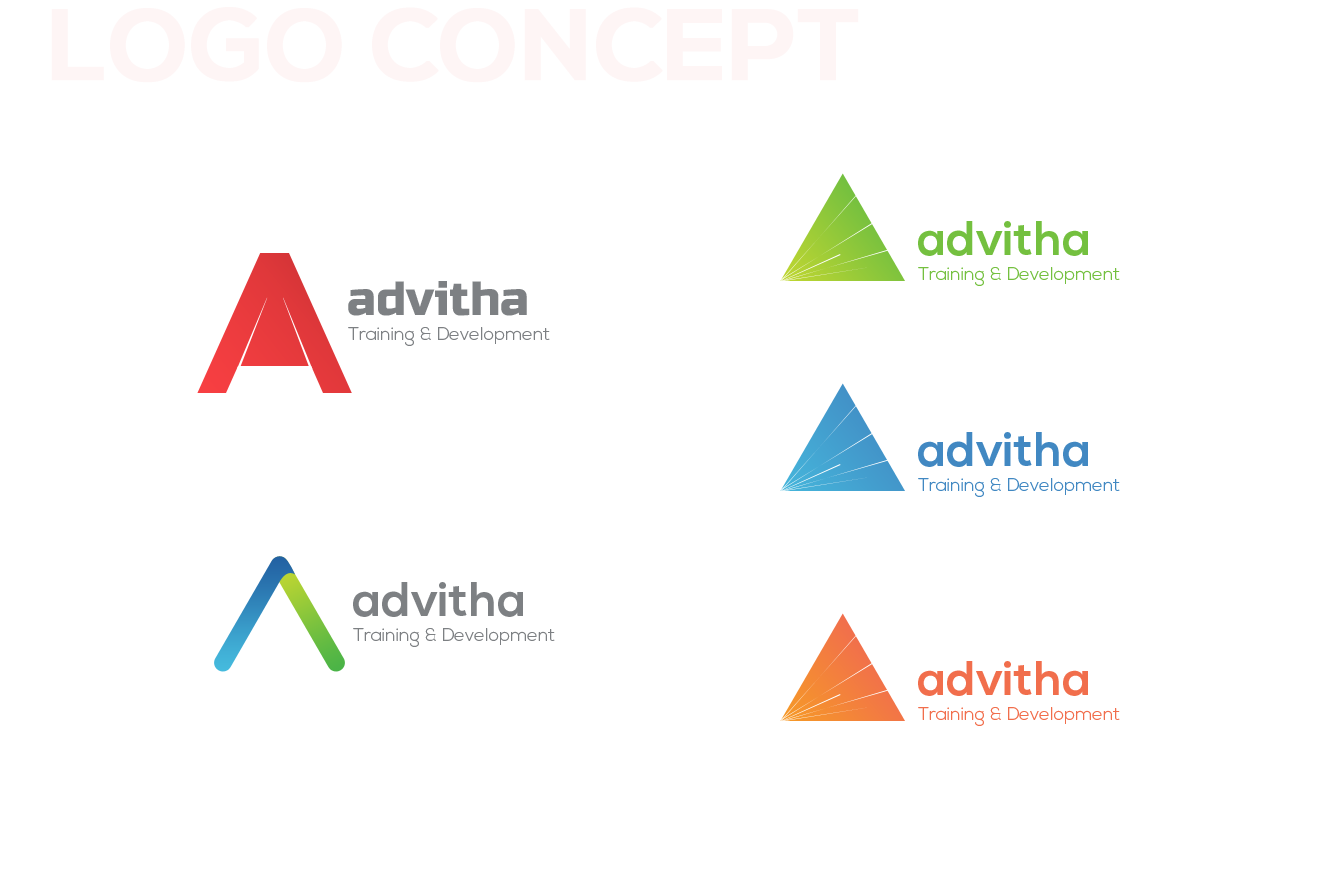
<style>
.page{position:relative;width:1325px;height:887px;background:#ffffff}
.page>*{position:absolute;margin:0}
.t1{font:100px "NexaBold";color:#fef5f5;font-weight:bold}
.t2{font:48px "NexaBold";color:#74c03f}
.t3{font:18px "NexaLight";color:#74c03f}
.t4{font:48px "RussoOne-Regular";color:#7d8083}
.t5{font:18px "NexaLight";color:#7d8083}
.t6{font:48px "NexaBold";color:#4188c2}
.t7{font:18px "NexaLight";color:#4188c2}
.t8{font:48px "NexaBold";color:#7d8083}
.t9{font:48px "NexaBold";color:#f16e4c}
.t10{font:18px "NexaLight";color:#f16e4c}
</style>
<div class="page">
<p class="t1" style="left:51px;top:7px;width:808px;height:76px">LOGO CONCEPT</p>
<p class="t2" style="left:918px;top:221px;width:170px;height:35px">advitha</p>
<p class="t3" style="left:918px;top:267px;width:202px;height:19px">Training &amp; Development</p>
<p class="t4" style="left:348px;top:281px;width:179px;height:35px">advitha</p>
<p class="t5" style="left:348px;top:327px;width:202px;height:19px">Training &amp; Development</p>
<p class="t6" style="left:918px;top:432px;width:170px;height:35px">advitha</p>
<p class="t7" style="left:918px;top:478px;width:202px;height:19px">Training &amp; Development</p>
<p class="t8" style="left:353px;top:582px;width:170px;height:35px">advitha</p>
<p class="t5" style="left:353px;top:628px;width:202px;height:19px">Training &amp; Development</p>
<p class="t9" style="left:918px;top:661px;width:170px;height:35px">advitha</p>
<p class="t10" style="left:918px;top:707px;width:202px;height:19px">Training &amp; Development</p>
</div>
